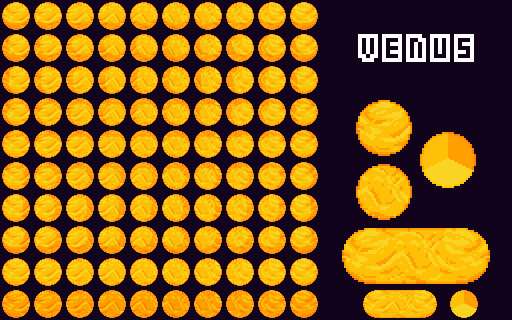
<style>
.page{position:relative;width:512px;height:320px;background:#12031d}
.page>*{position:absolute;margin:0}
.t1{font:32px "KenPixel-Blocks";color:#ffffff}
</style>
<div class="page">
<p class="t1" style="left:358px;top:34px;width:116px;height:28px">Venus</p>
</div>
